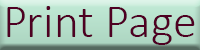
<style>
.page{position:relative;width:200px;height:50px}
.page>*{position:absolute;margin:0}
.t1{font:48px "Calibri-Light";color:#4e0022}
</style>
<div class="page">
<p class="t1" style="left:7px;top:6px;width:188px;height:39px">Print Page</p>
</div>
